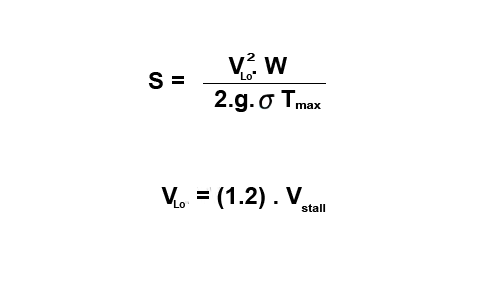
<style>
.page{position:relative;width:500px;height:300px;background:#ffffff}
.page>*{position:absolute;margin:0}
.t1{font:11.2px "Arial-BoldMT";color:#000000;scale:1.46 1}
.t2{font:24px "Arial-BoldMT";color:#000000}
.t3{font:11px "Arial-BoldMT";color:#000000;scale:0.9 1}
.t4{font:10.7px "Arial-BoldMT";color:#000000;scale:1.19 1}
.t5{font:10.9px "Arial-BoldMT";color:#000000;scale:1.12 1}
</style>
<div class="page">
<p class="t1" style="left:247px;top:53px;width:8px;height:8px">2</p>
<p class="t2" style="left:228px;top:57px;width:59px;height:17px">V . W</p>
<p class="t2" style="left:148px;top:72px;width:36px;height:17px">S =</p>
<p class="t3" style="left:240px;top:72px;width:12px;height:8px">Lo</p>
<p class="t2" style="left:214px;top:90px;width:40px;height:22px">2.g.</p>
<p class="t2" style="left:281px;top:90px;width:15px;height:17px">T</p>
<p class="t4" style="left:295px;top:103px;width:26px;height:6px">max</p>
<p class="t2" style="left:197px;top:187px;width:105px;height:22px">= (1.2) . V</p>
<p class="t3" style="left:173px;top:200px;width:12px;height:8px">Lo</p>
<p class="t5" style="left:301px;top:204px;width:25px;height:8px">stall</p>
</div>
